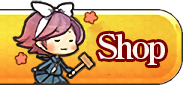
<style>
.page{position:relative;width:183px;height:85px}
.page>*{position:absolute;margin:0}
.t1{font:34px "RyuminPro-ExBold";letter-spacing:-0.08em;color:#fff5f0}
</style>
<div class="page">
<p class="t1" style="left:98px;top:33px;width:67px;height:32px">Shop</p>
</div>
